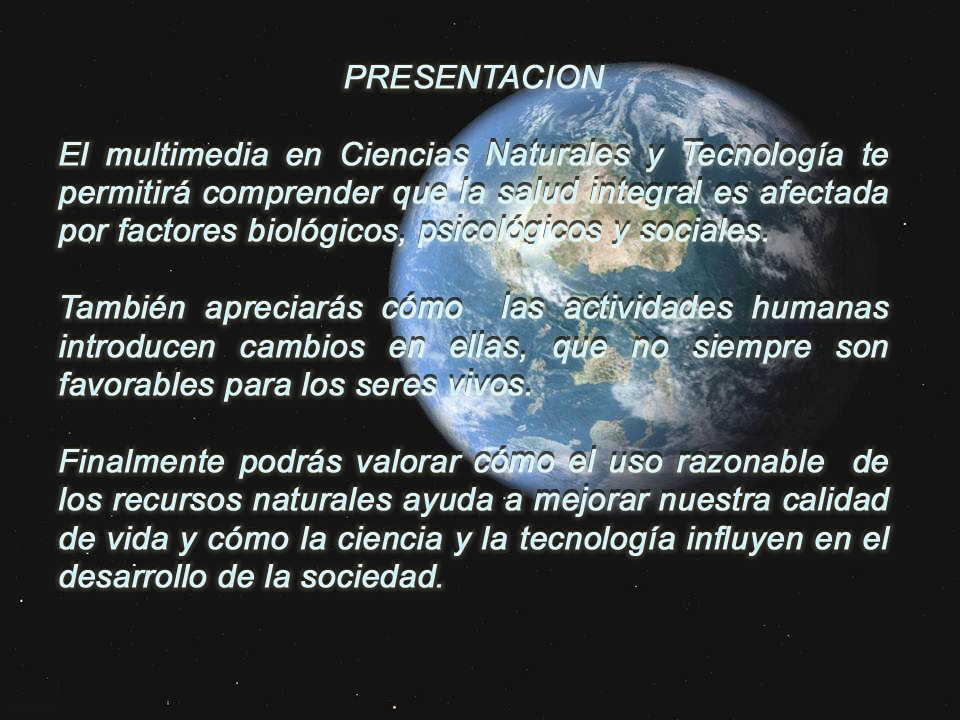
<style>
.page{position:relative;width:960px;height:720px;background:#151515}
.page>*{position:absolute;margin:0}
.t1{font:32px "Arial-ItalicMT";color:#ddf5f7;font-weight:bold}
</style>
<div class="page">
<p class="t1" style="left:57px;top:64px;width:834px;height:524px;text-align:center">PRESENTACION<br><br>El multimedia en Ciencias Naturales y Tecnología te permitirá comprender que la salud integral es afectada por factores biológicos, psicológicos y sociales.<br><br>También apreciarás cómo  las actividades humanas introducen cambios en ellas, que no siempre son favorables para los seres vivos.<br><br>Finalmente podrás valorar cómo el uso razonable  de los recursos naturales ayuda a mejorar nuestra calidad de vida y cómo la ciencia y la tecnología influyen en el desarrollo de la sociedad.</p>
</div>
